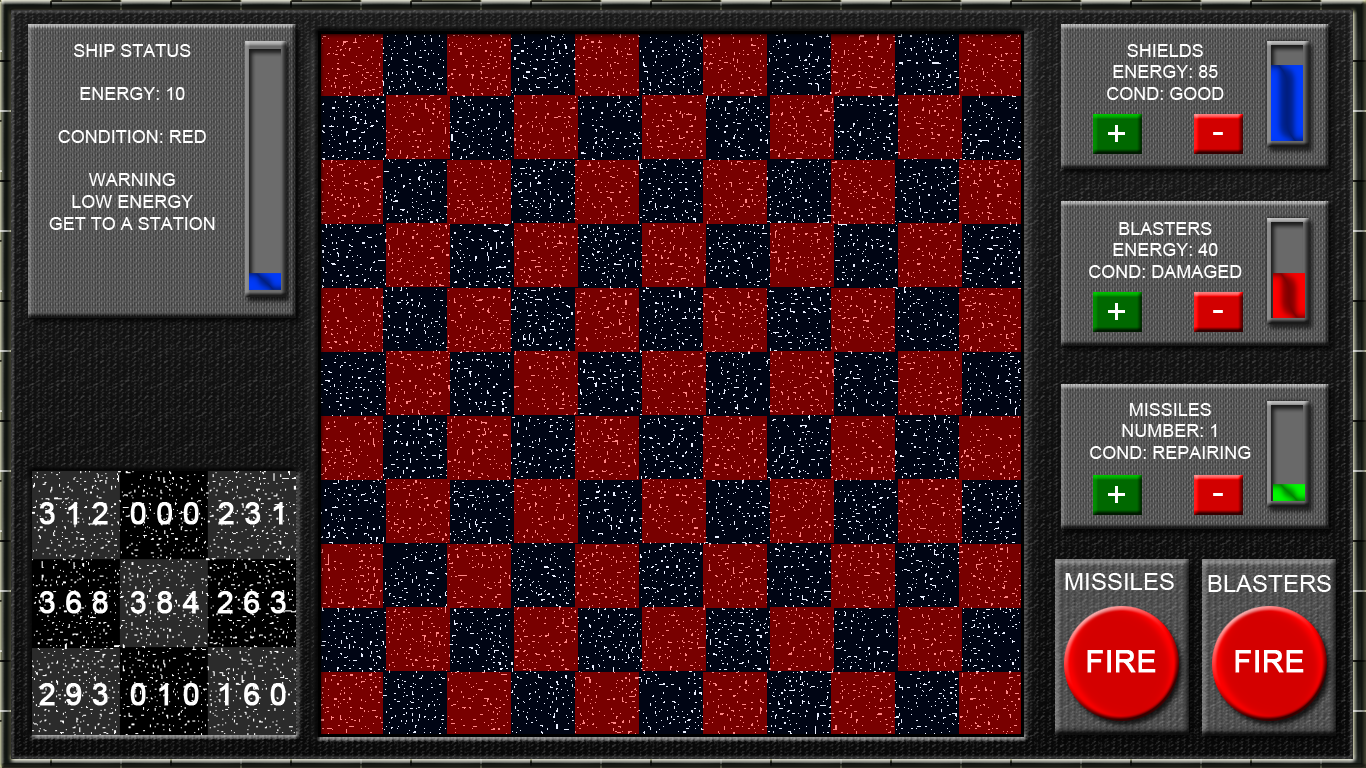
<style>
.page{position:relative;width:1366px;height:768px;background:#780000}
.page>*{position:absolute;margin:0}
.t1{font:18px "ArialMT";color:#ffffff}
.t2{font:24px "ArialMT";color:#ffffff}
.t3{font:30px "ArialMT";color:#ffffff;font-weight:bold}
</style>
<div class="page">
<p class="t1" style="left:49px;top:44px;width:166px;height:186px;text-align:center">SHIP STATUS<br><br>ENERGY: 10<br><br>CONDITION: RED<br><br>WARNING<br>LOW ENERGY<br>GET TO A STATION</p>
<p class="t1" style="left:1107px;top:44px;width:117px;height:56px;text-align:center">SHIELDS<br>ENERGY: 85<br>COND: GOOD</p>
<p class="t1" style="left:1089px;top:222px;width:153px;height:56px;text-align:center">BLASTERS<br>ENERGY: 40<br>COND: DAMAGED</p>
<p class="t1" style="left:1090px;top:403px;width:161px;height:56px;text-align:center">MISSILES<br>NUMBER: 1<br>COND: REPAIRING</p>
<p class="t2" style="left:1065px;top:573px;width:109px;height:17px">MISSILES</p>
<p class="t2" style="left:1208px;top:575px;width:123px;height:17px">BLASTERS</p>
<p class="t3" style="left:1087px;top:650px;width:69px;height:23px">FIRE</p>
<p class="t3" style="left:1235px;top:650px;width:69px;height:23px">FIRE</p>
</div>
